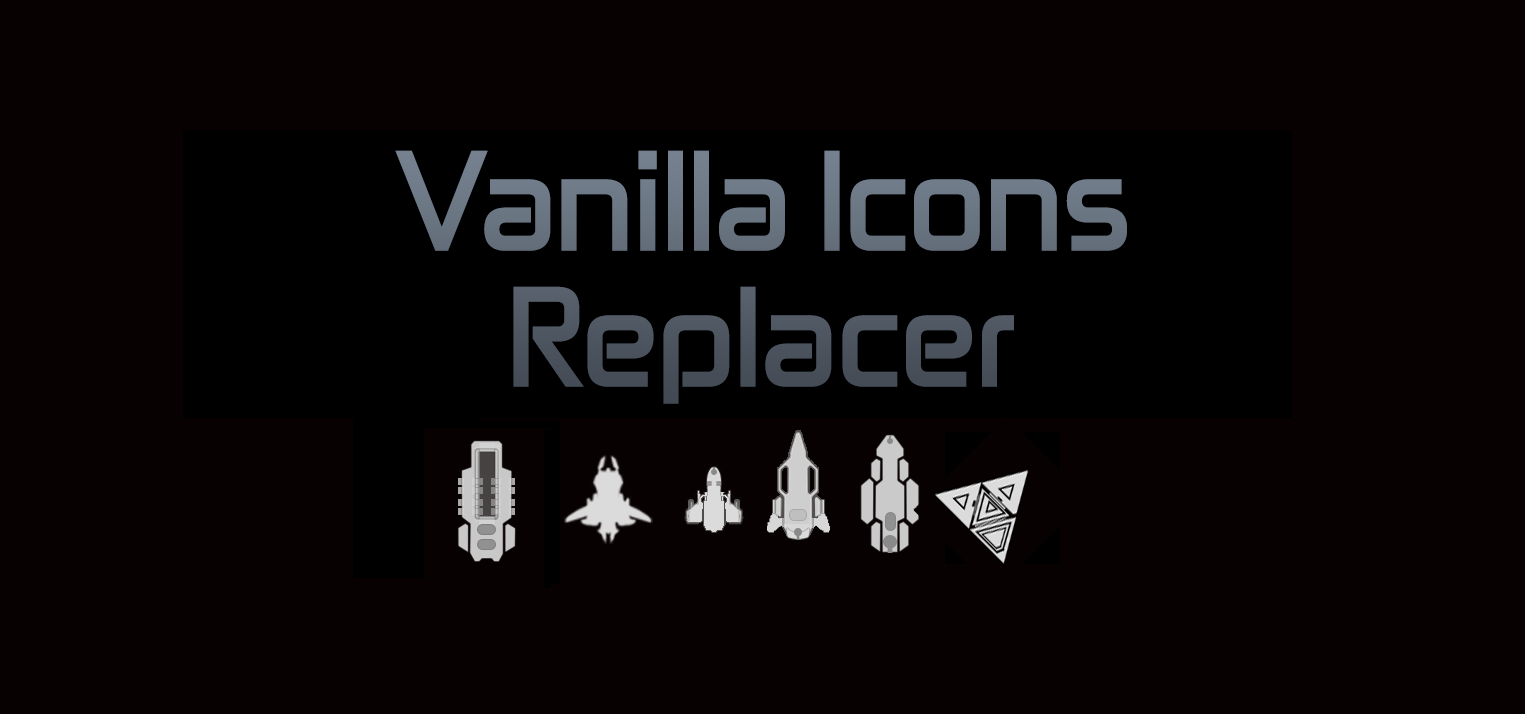
<style>
.page{position:relative;width:1525px;height:714px;background:#080101}
.page>*{position:absolute;margin:0}
.t1{font:113.3px "Zekton-Bold"}
</style>
<div class="page">
<p class="t1" style="left:395px;top:150px;width:732px;height:254px;text-align:center">Vanilla Icons Replacer</p>
</div>
